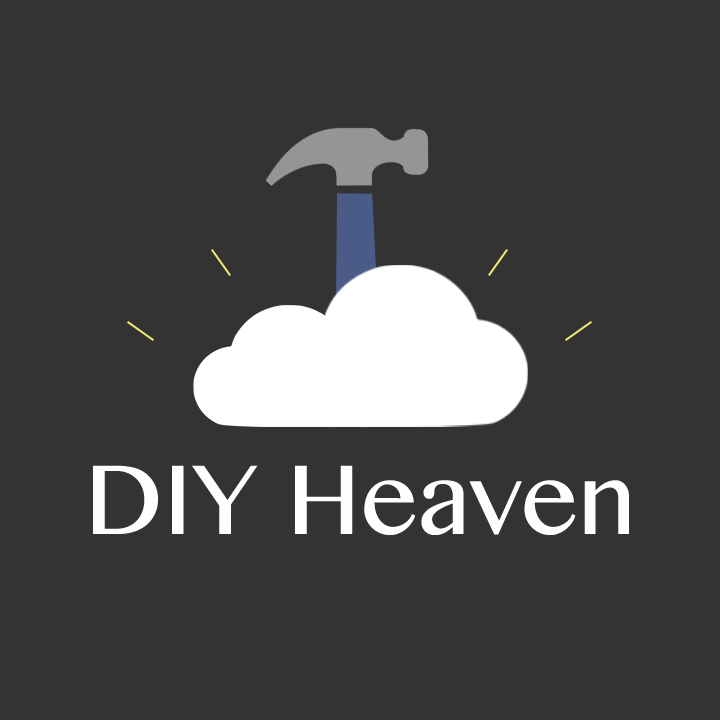
<style>
.page{position:relative;width:720px;height:720px;background:#333333}
.page>*{position:absolute;margin:0}
.t1{font:100px "MyanmarMN";color:#fefefe}
</style>
<div class="page">
<p class="t1" style="left:93px;top:465px;width:536px;height:70px">DIY Heaven</p>
</div>
